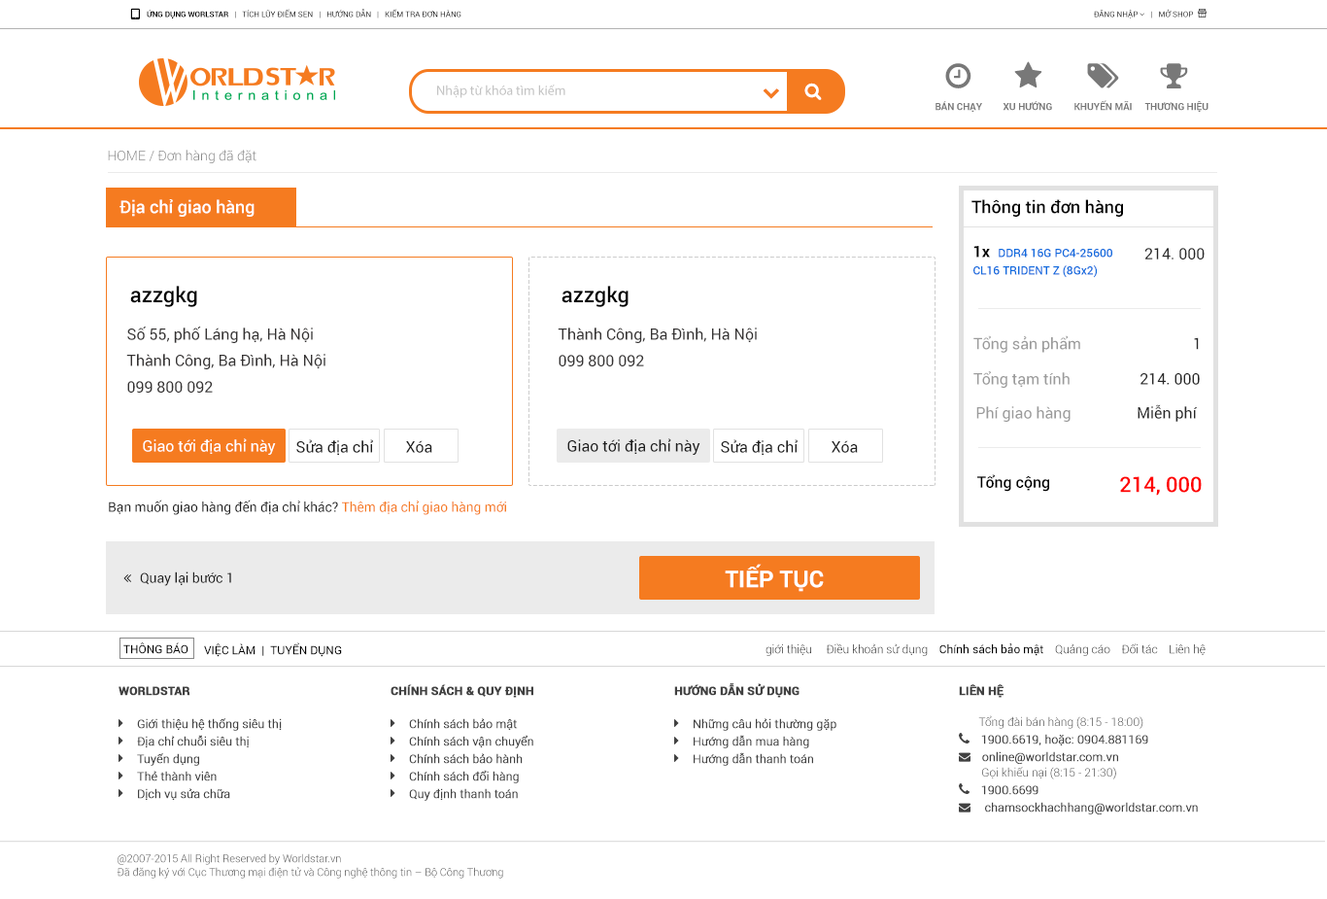
<style>
.page{position:relative;width:1327px;height:899px;background:#ffffff}
.page>*{position:absolute;margin:0}
.t1{font:7.8px "Roboto-Bold";color:#000000;text-transform:uppercase}
.t2{font:7.8px "Roboto-Regular";color:#000000;text-transform:uppercase}
.t3{font:13.6px "MyriadPro-Regular";color:#c3c3c3}
.t4{font:9.7px "Roboto-Bold";color:#787878;text-transform:uppercase}
.t5{font:13.6px "Roboto-Light";color:#888888}
.t6{font:17.5px "Roboto-Medium";color:#ffffff}
.t7{font:17.5px "Roboto-Medium";color:#010101}
.t8{font:11.7px/17.5px "Roboto-Medium";color:#106cde}
.t9{font:15.9px/17.5px "Roboto-Bold";color:#000000}
.t10{font:15.5px "Roboto-Regular";color:#282828}
.t11{font:21.4px "Roboto-Medium";color:#000000}
.t12{font:15.5px "Roboto-Regular";color:#353333}
.t13{font:15.5px "Roboto-Regular";color:#9b9b9b}
.t14{font:15.5px "Roboto-Regular";color:#ffffff}
.t15{font:15.5px "Roboto-Regular";color:#1f1f1f}
.t16{font:15.5px "Roboto-Regular";color:#1e1e1e}
.t17{font:15.5px "Roboto-Medium";color:#000000}
.t18{font:21.4px "Roboto-Medium";color:#ff0000}
.t19{font:13.3px "Roboto-Regular";color:#1f1f1f}
.t20{font:13.3px "Roboto-Regular";color:#f57b20}
.t21{font:23.3px "Roboto-Bold";color:#ffffff;text-transform:uppercase}
.t22{font:11.7px "Roboto-Regular";color:#000000}
.t23{font:11.7px "Roboto-Light";color:#000000}
.t24{font:10.7px/13.6px "Roboto-Light";color:#414141}
</style>
<div class="page">
<p class="t1" style="left:147px;top:9px;width:314px;height:9px">ứng dụng Worlstar   |   <span class="t2">Tích lũy điểm sen</span>   |   <span class="t2">hướng dẫn</span>   |   <span class="t2">kiểm tra đơn hàng</span></p>
<p class="t3" style="left:437px;top:85px;width:128px;height:13px">Nhập từ khóa tìm kiếm</p>
<p class="t4" style="left:936px;top:101px;width:46px;height:11px">Bán chạy</p>
<p class="t4" style="left:1003px;top:101px;width:49px;height:10px">xu hướng</p>
<p class="t4" style="left:1074px;top:100px;width:58px;height:11px">khuyến mãi</p>
<p class="t4" style="left:1144px;top:101px;width:64px;height:11px">thương hiệu</p>
<p class="t5" style="left:108px;top:150px;width:148px;height:13px">HOME / Đơn hàng đã đặt</p>
<p class="t6" style="left:119px;top:199px;width:136px;height:18px">Địa chỉ giao hàng</p>
<p class="t7" style="left:971px;top:199px;width:152px;height:18px">Thông tin đơn hàng</p>
<p class="t8" style="left:973px;top:246px;width:139px;height:32px"><span class="t9">1x  </span>DDR4 16G PC4-25600 <br>CL16 TRIDENT Z (8Gx2)</p>
<p class="t10" style="left:1144px;top:248px;width:61px;height:11px">214. 000</p>
<p class="t11" style="left:130px;top:286px;width:67px;height:21px">azzgkg</p>
<p class="t11" style="left:561px;top:286px;width:68px;height:21px">azzgkg</p>
<p class="t12" style="left:127px;top:326px;width:186px;height:17px">Số 55, phố Láng hạ, Hà Nội</p>
<p class="t12" style="left:558px;top:327px;width:199px;height:16px">Thành Công, Ba Đình, Hà Nội</p>
<p class="t13" style="left:973px;top:335px;width:226px;height:18px">Tổng sản phẩm<span class="t10">                             1</span></p>
<p class="t12" style="left:126px;top:354px;width:199px;height:15px">Thành Công, Ba Đình, Hà Nội</p>
<p class="t12" style="left:559px;top:355px;width:85px;height:11px">099 800 092</p>
<p class="t13" style="left:973px;top:371px;width:227px;height:17px">Tổng tạm tính<span class="t10">                  214. 000</span></p>
<p class="t12" style="left:127px;top:381px;width:86px;height:11px">099 800 092</p>
<p class="t13" style="left:976px;top:404px;width:222px;height:18px">Phí giao hàng<span class="t10">                 Miễn phí</span></p>
<p class="t14" style="left:143px;top:438px;width:133px;height:17px">Giao tới địa chỉ này</p>
<p class="t15" style="left:296px;top:439px;width:77px;height:16px">Sửa địa chỉ</p>
<p class="t15" style="left:406px;top:440px;width:26px;height:13px">Xóa</p>
<p class="t16" style="left:567px;top:438px;width:133px;height:17px">Giao tới địa chỉ này</p>
<p class="t15" style="left:721px;top:439px;width:77px;height:16px">Sửa địa chỉ</p>
<p class="t15" style="left:832px;top:440px;width:26px;height:13px">Xóa</p>
<p class="t17" style="left:977px;top:474px;width:72px;height:18px">Tổng cộng</p>
<p class="t18" style="left:1120px;top:476px;width:82px;height:19px">214, 000</p>
<p class="t19" style="left:109px;top:499px;width:397px;height:16px">Bạn muốn giao hàng đến địa chỉ khác? <span class="t20">Thêm địa chỉ giao hàng mới</span></p>
<p class="t21" style="left:725px;top:563px;width:99px;height:29px">Tiếp tục</p>
<p class="t22" style="left:123px;top:642px;width:65px;height:12px">THÔNG BÁO</p>
<p class="t22" style="left:204px;top:642px;width:138px;height:15px">VIỆC LÀM  |  TUYỂN DỤNG</p>
<p class="t23" style="left:766px;top:643px;width:440px;height:13px">giới thiệu     Điều khoản sử dụng    <span class="t22">Chính sách bảo mật</span>    Quảng cáo    Đối tác    Liên hệ</p>
<p class="t24" style="left:117px;top:853px;width:386px;height:25px">@2007-2015 All Right Reserved by Worldstar.vn <br>Đã đăng ký với Cục Thương mại điện tử và Công nghệ thông tin – Bộ Công Thương</p>
</div>
